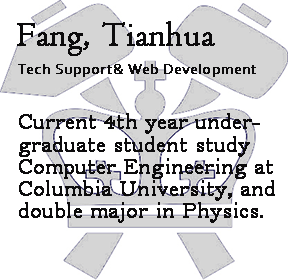
<style>
.page{position:relative;width:288px;height:280px;background:#ffffff}
.page>*{position:absolute;margin:0}
.t1{font:35px "Centaur";letter-spacing:0.005em;color:#0c0b0c;font-weight:bold}
.t2{font:15px "Corbel";letter-spacing:0.005em;color:#0c0b0c;font-weight:bold}
.t3{font:22.5px/22.2px "BellMT";color:#0c0b0c;font-weight:bold}
.t4{font:20px/22.2px "BellMT";letter-spacing:0.005em;color:#0c0b0c;font-weight:bold}
</style>
<div class="page">
<p class="t1" style="left:17px;top:21px;width:198px;height:35px">Fang, Tianhua</p>
<p class="t2" style="left:18px;top:64px;width:238px;height:13px">Tech Support&amp; Web Development</p>
<p class="t3" style="left:19px;top:113px;width:256px;height:110px"><span class="t4"><br></span>Current 4th year undergraduate student study Computer Engineering at Columbia University, and double major in Physics.</p>
</div>
